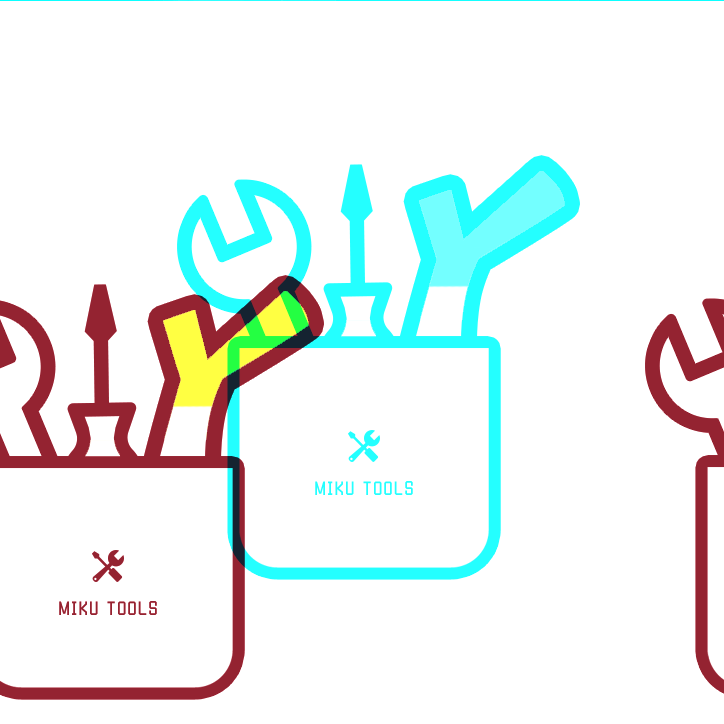
<style>
.page{position:relative;width:724px;height:724px;background:#ffffff}
.page>*{position:absolute;margin:0}
.t1{font:18.7px "zcoolqingkehuangyouti-Regular";letter-spacing:0.108em}
</style>
<div class="page">
<p class="t1" style="left:315px;top:480px;width:98px;height:14px">MIKU TOOLS</p>
</div>
